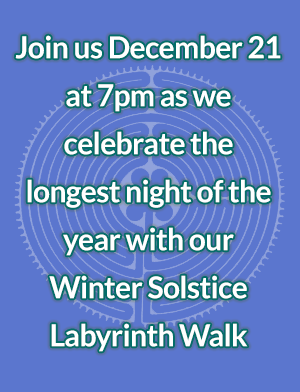
<style>
.page{position:relative;width:300px;height:392px;background:#5b76ce}
.page>*{position:absolute;margin:0}
.t1{font:30px/48px "Lato-Bold";letter-spacing:-0.02em;color:#ffffff}
</style>
<div class="page">
<p class="t1" style="left:15px;top:35px;width:266px;height:317px;text-align:center">Join us December 21 at 7pm as we celebrate the longest night of the year with our <br>Winter Solstice Labyrinth Walk</p>
</div>
